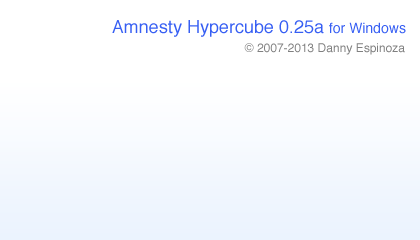
<style>
.page{position:relative;width:420px;height:240px;background:#ffffff}
.page>*{position:absolute;margin:0}
.t1{font:18px "Helvetica";color:#375ff3}
.t2{font:14px "Helvetica";color:#375ff3}
.t3{font:12px "Helvetica";color:#808080}
</style>
<div class="page">
<p class="t1" style="left:112px;top:20px;width:294px;height:17px">Amnesty Hypercube 0.25a <span class="t2">for Windows</span></p>
<p class="t3" style="left:244px;top:43px;width:161px;height:12px">© 2007-2013 Danny Espinoza</p>
</div>
